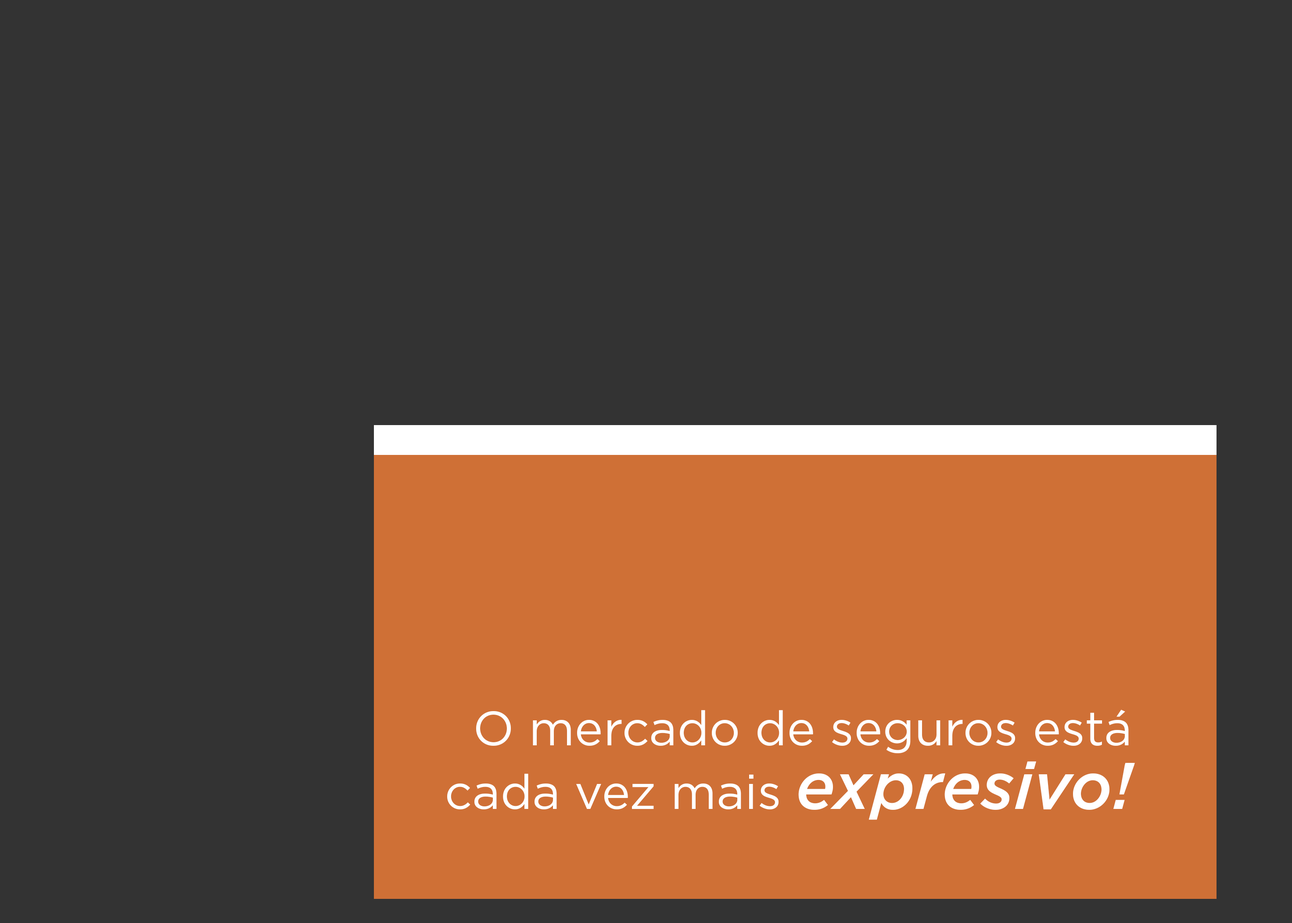
<style>
.page{position:relative;width:1292px;height:923px;background:#333333}
.page>*{position:absolute;margin:0}
.t1{font:48.3px "Gotham-Book";color:#ffffff}
.t2{font:65.8px "Gotham-MediumItalic";color:#ffffff}
</style>
<div class="page">
<p class="t1" style="left:447px;top:709px;width:688px;height:111px">O mercado de seguros está cada vez mais <span class="t2">expresivo!</span></p>
</div>
